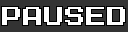
<style>
.page{position:relative;width:128px;height:32px;background:#333333}
.page>*{position:absolute;margin:0}
.t1{font:21.3px "MegaMan-2";color:#ffffff}
</style>
<div class="page">
<p class="t1" style="left:2px;top:7px;width:123px;height:18px">PAUSED</p>
</div>
